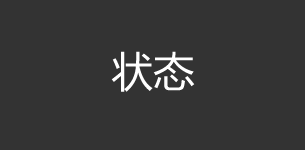
<style>
.page{position:relative;width:305px;height:150px;background:#333333}
.page>*{position:absolute;margin:0}
.t1{font:41.7px "MicrosoftYaHei";color:#ffffff}
</style>
<div class="page">
<p class="t1" style="left:111px;top:51px;width:84px;height:41px">状态</p>
</div>
